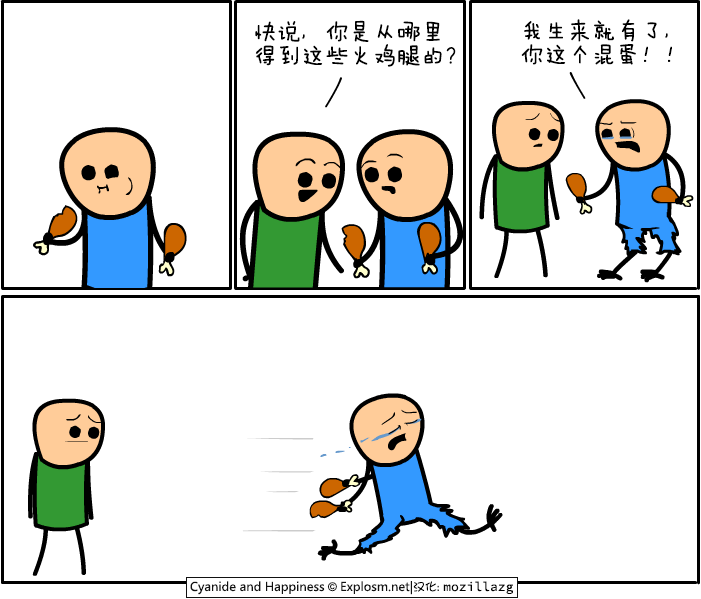
<style>
.page{position:relative;width:701px;height:599px;background:#ffffff}
.page>*{position:absolute;margin:0}
.t1{font:24px/24px "FZMWJW--GB1-0";color:#000000}
</style>
<div class="page">
<p class="t1" style="left:255px;top:20px;width:201px;height:47px">快说，你是从哪里<br>得到这些火鸡腿的？</p>
<p class="t1" style="left:521px;top:19px;width:151px;height:46px">我生来就有了，<br>你这个混蛋！！</p>
</div>
